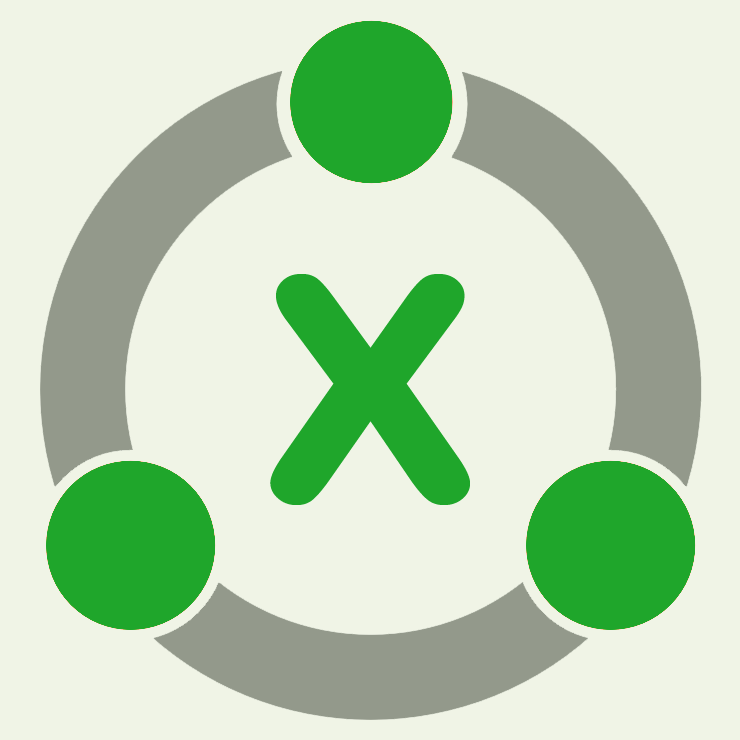
<style>
.page{position:relative;width:740px;height:740px;background:#f0f4e6}
.page>*{position:absolute;margin:0}
.t1{font:426.7px "ArialRoundedMTBold";letter-spacing:0.021em;color:#1fa62b}
</style>
<div class="page">
<p class="t1" style="left:270px;top:274px;width:200px;height:231px">x</p>
</div>
